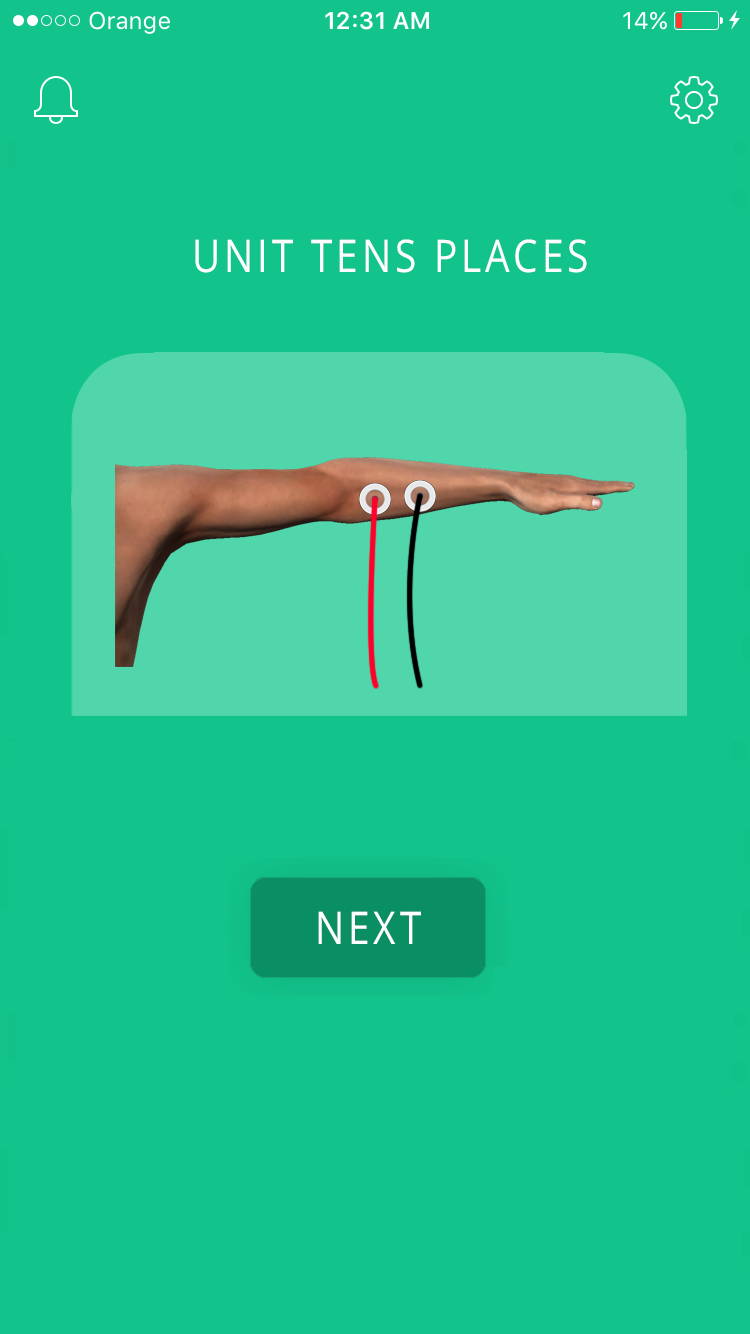
<style>
.page{position:relative;width:750px;height:1334px;background:#12c48b}
.page>*{position:absolute;margin:0}
.t1{font:45px "OpenSans";letter-spacing:0.1em;color:#fefefe;text-transform:uppercase;scale:0.86 1}
.t2{font:45px "OpenSans";letter-spacing:0.1em;color:#feffff;text-transform:uppercase;scale:0.86 1}
</style>
<div class="page">
<p class="t1" style="left:195px;top:239px;width:392px;height:34px">Unit tens places</p>
<p class="t2" style="left:318px;top:911px;width:103px;height:33px">next</p>
</div>
